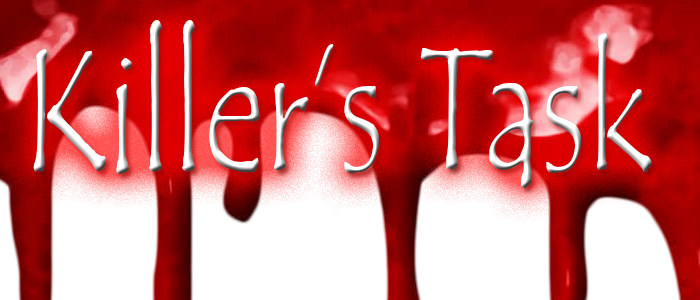
<style>
.page{position:relative;width:700px;height:300px;background:#ffffff}
.page>*{position:absolute;margin:0}
.t1{font:178.8px "TempusSansITC";scale:0.72 1}
</style>
<div class="page">
<p class="t1" style="left:33px;top:20px;width:619px;height:168px">Killer’s Task</p>
</div>
